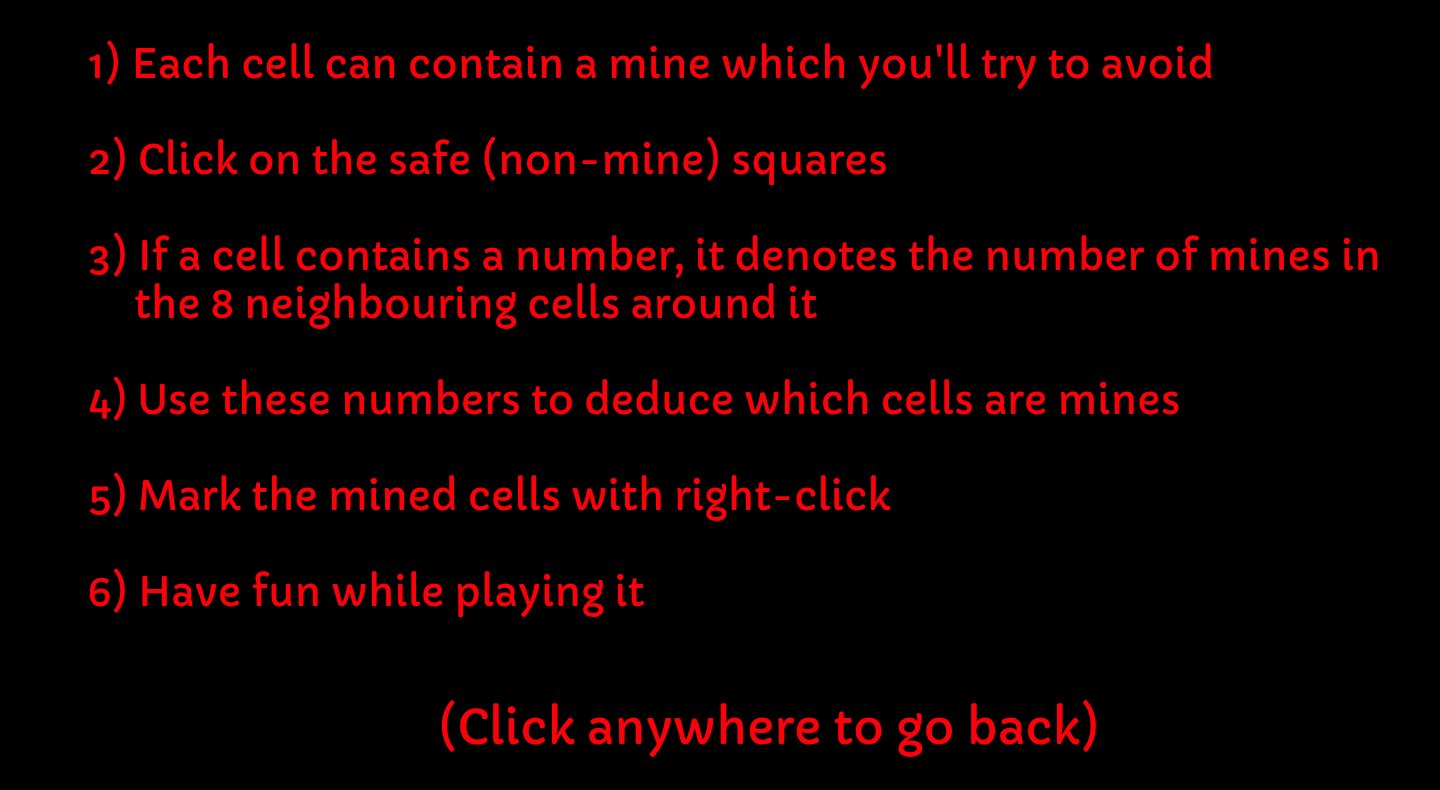
<style>
.page{position:relative;width:1440px;height:790px;background:#000000}
.page>*{position:absolute;margin:0}
.t1{font:40px "Capriola-Regular";color:#ff000a}
.t2{font:47px "Capriola-Regular";color:#ff000a}
</style>
<div class="page">
<p class="t1" style="left:89px;top:40px;width:1289px;height:578px">1) Each cell can contain a mine which you'll try to avoid<br><br>2) Click on the safe (non-mine) squares<br><br>3) If a cell contains a number, it denotes the number of mines in<br>  the 8 neighbouring cells around it<br><br>4) Use these numbers to deduce which cells are mines <br><br>5) Mark the mined cells with right-click<br><br>6) Have fun while playing it</p>
<p class="t2" style="left:441px;top:700px;width:655px;height:58px">(Click anywhere to go back)</p>
</div>
